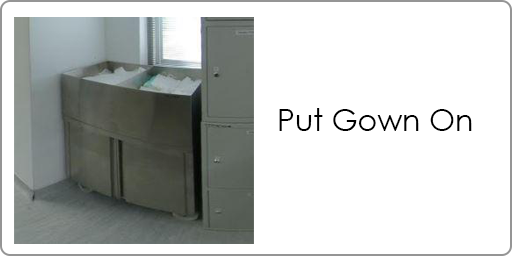
<style>
.page{position:relative;width:512px;height:256px;background:#ffffff}
.page>*{position:absolute;margin:0}
.t1{font:30px "CenturyGothic";color:#000000}
</style>
<div class="page">
<p class="t1" style="left:279px;top:108px;width:193px;height:23px">Put Gown On</p>
</div>
